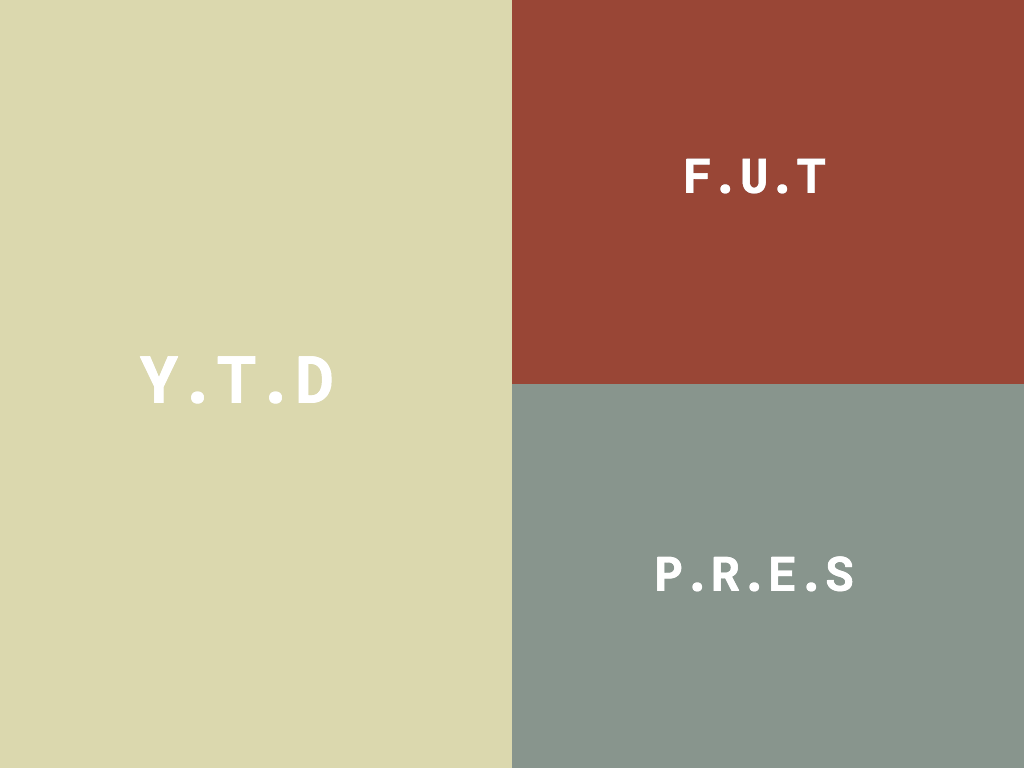
<style>
.page{position:relative;width:1024px;height:768px;background:#dbd8ae}
.page>*{position:absolute;margin:0}
.t1{font:47.4px "RobotoMono-Bold";color:#ffffff}
.t2{font:65.1px "RobotoMono-Bold";color:#ffffff}
</style>
<div class="page">
<p class="t1" style="left:686px;top:158px;width:140px;height:36px">F.U.T</p>
<p class="t2" style="left:139px;top:356px;width:193px;height:48px">Y.T.D</p>
<p class="t1" style="left:657px;top:556px;width:196px;height:36px">P.R.E.S</p>
</div>
